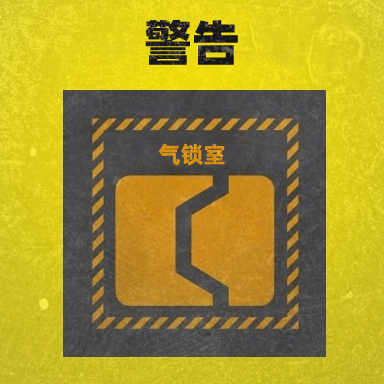
<style>
.page{position:relative;width:384px;height:384px}
.page>*{position:absolute;margin:0}
.t1{font:48.4px "AlibabaPuHuiTiH";color:#171717}
.t2{font:23px "AlibabaPuHuiTiB";color:#e0940f}
</style>
<div class="page">
<p class="t1" style="left:145px;top:20px;width:93px;height:45px">警告</p>
<p class="t2" style="left:158px;top:143px;width:67px;height:23px">气锁室</p>
</div>
